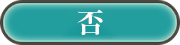
<style>
.page{position:relative;width:180px;height:45px}
.page>*{position:absolute;margin:0}
.t1{font:28px "RyuminPr6N-ExBold";color:#fdfbf9}
</style>
<div class="page">
<p class="t1" style="left:77px;top:9px;width:26px;height:26px">否</p>
</div>
